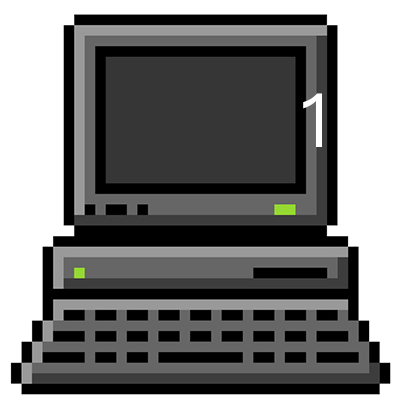
<style>
.page{position:relative;width:400px;height:400px;background:#ffffff}
.page>*{position:absolute;margin:0}
.t1{font:75px "PingFangTC-Regular";color:#ffffff}
</style>
<div class="page">
<p class="t1" style="left:303px;top:93px;width:19px;height:54px">1</p>
</div>
